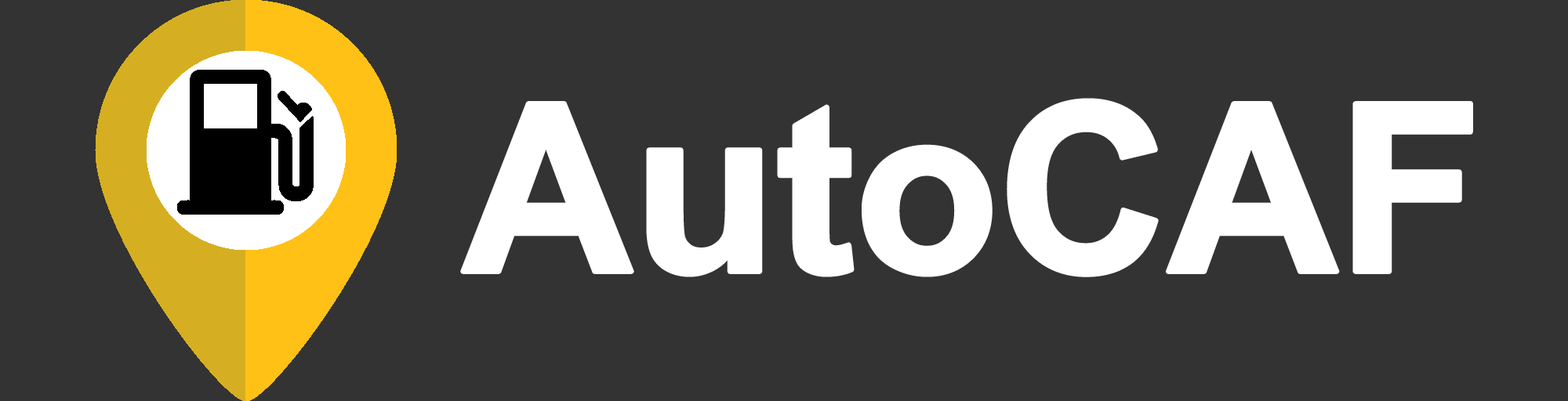
<style>
.page{position:relative;width:1568px;height:401px;background:#333333}
.page>*{position:absolute;margin:0}
.t1{font:235.2px "Arial-BoldMT";color:#ffffff}
</style>
<div class="page">
<p class="t1" style="left:463px;top:100px;width:1008px;height:175px">AutoCAF</p>
</div>
